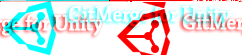
<style>
.page{position:relative;width:242px;height:55px;background:#ffffff}
.page>*{position:absolute;margin:0}
.t1{font:22.9px "ChaparralPro-Regular";letter-spacing:-0.025em;color:#ffffff;font-weight:bold;scale:0.9 1}
</style>
<div class="page">
<p class="t1" style="left:69px;top:5px;width:163px;height:22px">GitMerge for Unity</p>
</div>
